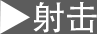
<style>
.page{position:relative;width:97px;height:34px;background:#5c5c5c}
.page>*{position:absolute;margin:0}
.t1{font:33.4px "AdobeHeitiStd-Regular";color:#ffffff}
</style>
<div class="page">
<p class="t1" style="left:33px;top:1px;width:64px;height:32px">射击</p>
</div>
